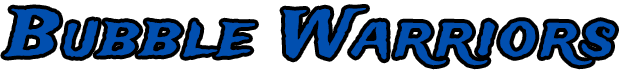
<style>
.page{position:relative;width:620px;height:70px;background:#ffffff}
.page>*{position:absolute;margin:0}
.t1{font:63px "TradeWinds";letter-spacing:0.065em;color:#014faf}
</style>
<div class="page">
<p class="t1" style="left:4px;top:8px;width:611px;height:58px">Bubble Warriors</p>
</div>
